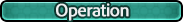
<style>
.page{position:relative;width:183px;height:22px}
.page>*{position:absolute;margin:0}
.t1{font:18px "AdobeClean-Regular";letter-spacing:-0.04em;color:#edeff1;font-weight:bold}
</style>
<div class="page">
<p class="t1" style="left:56px;top:3px;width:73px;height:18px">Operation</p>
</div>
